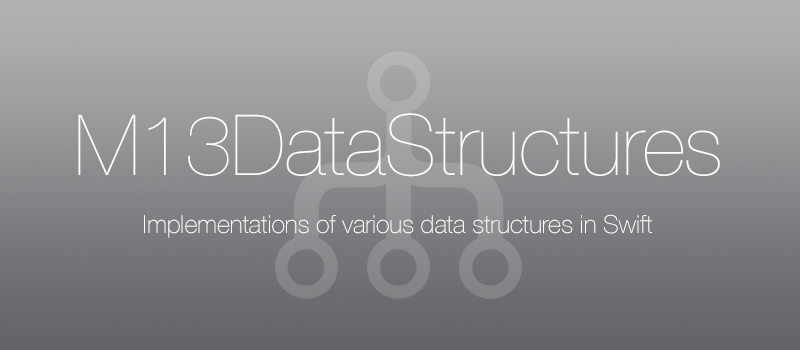
<style>
.page{position:relative;width:800px;height:350px}
.page>*{position:absolute;margin:0}
.t1{font:84.3px "HelveticaNeue-UltraLight";letter-spacing:-0.007em;color:#ffffff}
.t2{font:25px "HelveticaNeue-Thin";letter-spacing:-0.007em;color:#ffffff}
</style>
<div class="page">
<p class="t1" style="left:78px;top:113px;width:642px;height:64px">M13DataStructures</p>
<p class="t2" style="left:144px;top:214px;width:508px;height:24px">Implementations of various data structures in Swift</p>
</div>
